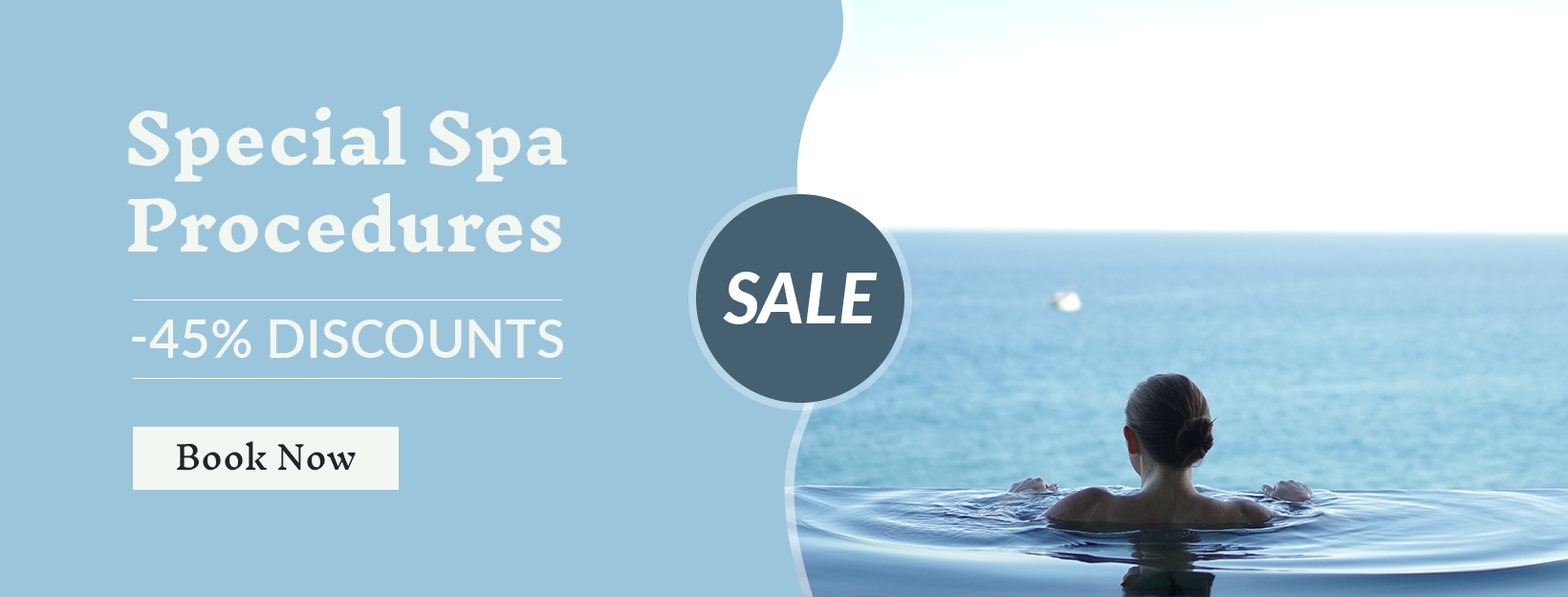
<style>
.page{position:relative;width:1568px;height:597px;background:#9bc5db}
.page>*{position:absolute;margin:0}
.t1{font:66.9px/87px "InknutAntiqua-Bold";color:#f3f7f2}
.t2{font:69.8px "Lato-HeavyItalic";color:#ffffff;text-transform:uppercase}
.t3{font:52.6px "Lato-Semibold";color:#f3f7f2;text-transform:uppercase}
.t4{font:32.5px "InknutAntiqua-Medium";color:#212428}
</style>
<div class="page">
<p class="t1" style="left:127px;top:106px;width:441px;height:146px">Special Spa<br>Procedures</p>
<p class="t2" style="left:723px;top:272px;width:155px;height:52px">Sale</p>
<p class="t3" style="left:132px;top:319px;width:431px;height:39px">-45% Discounts</p>
<p class="t4" style="left:176px;top:441px;width:180px;height:29px">Book Now</p>
</div>
